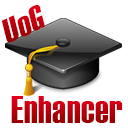
<style>
.page{position:relative;width:128px;height:128px;background:#ffffff}
.page>*{position:absolute;margin:0}
.t1{font:34.1px "Haettenschweiler";letter-spacing:0.02em;color:#ba000c;scale:1.09 1}
.t2{font:37.5px "Haettenschweiler";letter-spacing:0.02em}
</style>
<div class="page">
<p class="t1" style="left:1px;top:5px;width:44px;height:38px;rotate:-24deg">UoG</p>
<p class="t2" style="left:11px;top:96px;width:112px;height:27px">Enhancer</p>
</div>
